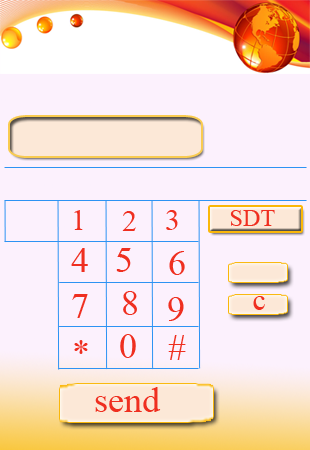
<style>
.page{position:relative;width:310px;height:450px;background:#fcf1fd}
.page>*{position:absolute;margin:0}
.t1{font:30px "TimesNewRomanPSMT";color:#ef2f20}
.t2{font:24px "TimesNewRomanPSMT";color:#ef2f20}
.t3{font:36px "TimesNewRomanPSMT";color:#ef2f20}
</style>
<div class="page">
<p class="t1" style="left:74px;top:210px;width:9px;height:20px">1</p>
<p class="t1" style="left:122px;top:211px;width:14px;height:20px">2</p>
<p class="t1" style="left:166px;top:210px;width:12px;height:20px">3</p>
<p class="t2" style="left:230px;top:210px;width:45px;height:16px">SDT</p>
<p class="t3" style="left:71px;top:248px;width:17px;height:24px">4</p>
<p class="t3" style="left:116px;top:248px;width:15px;height:24px">5</p>
<p class="t3" style="left:169px;top:251px;width:16px;height:24px">6</p>
<p class="t3" style="left:72px;top:294px;width:16px;height:24px">7</p>
<p class="t3" style="left:123px;top:291px;width:14px;height:24px">8</p>
<p class="t3" style="left:168px;top:297px;width:16px;height:24px">9</p>
<p class="t1" style="left:253px;top:296px;width:12px;height:14px">c</p>
<p class="t3" style="left:74px;top:340px;width:14px;height:14px">*</p>
<p class="t3" style="left:120px;top:334px;width:16px;height:24px">0</p>
<p class="t3" style="left:168px;top:335px;width:18px;height:25px">#</p>
<p class="t3" style="left:95px;top:387px;width:66px;height:25px">send</p>
</div>
